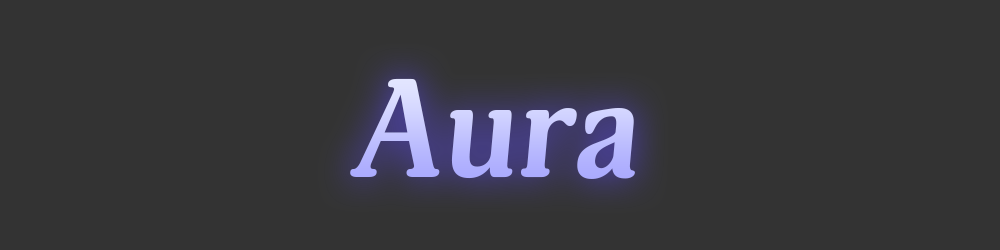
<style>
.page{position:relative;width:1000px;height:250px;background:#333333}
.page>*{position:absolute;margin:0}
.t1{font:139.4px "Adonis-Bold";color:#bfc0fe}
</style>
<div class="page">
<p class="t1" style="left:350px;top:78px;width:285px;height:101px">Aura</p>
</div>
